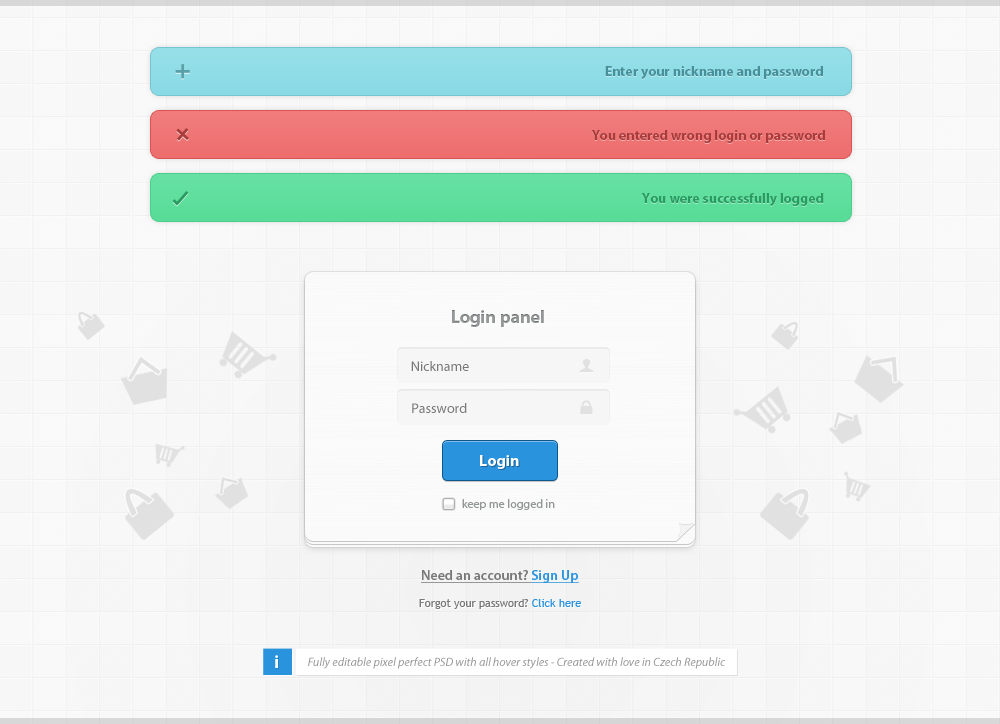
<style>
.page{position:relative;width:1000px;height:724px}
.page>*{position:absolute;margin:0}
.t1{font:14px "MyriadPro-Bold";color:#479099}
.t2{font:14px "MyriadPro-Bold";color:#a93b3b}
.t3{font:14px "MyriadPro-Bold";color:#299a60}
.t4{font:18px "MyriadPro-Bold";color:#939797}
.t5{font:14px "MyriadPro-Regular";color:#787878}
.t6{font:16px "MyriadPro-Bold";color:#ffffff}
.t7{font:12px "MyriadPro-Regular";color:#939797}
.t8{font:14px "MyriadPro-Semibold";color:#787878;text-decoration:underline}
.t9{font:14px "MyriadPro-Semibold";color:#2993de;text-decoration:underline}
.t10{font:11px "TrebuchetMS";color:#797979}
.t11{font:11px "TrebuchetMS";color:#2993de}
.t12{font:18px "MyriadPro-Bold";color:#fffefe}
.t13{font:12px "MyriadPro-It";color:#969696}
</style>
<div class="page">
<p class="t1" style="left:605px;top:66px;width:218px;height:13px">Enter your nickname and password</p>
<p class="t2" style="left:591px;top:130px;width:234px;height:13px">You entered wrong login or password</p>
<p class="t3" style="left:641px;top:193px;width:183px;height:13px">You were successfully logged</p>
<p class="t4" style="left:452px;top:310px;width:92px;height:17px">Login panel</p>
<p class="t5" style="left:411px;top:361px;width:58px;height:10px">Nickname</p>
<p class="t5" style="left:412px;top:403px;width:55px;height:10px">Password</p>
<p class="t6" style="left:480px;top:455px;width:39px;height:14px">Login</p>
<p class="t7" style="left:462px;top:499px;width:93px;height:11px">keep me logged in</p>
<p class="t8" style="left:421px;top:570px;width:158px;height:13px">Need an account? <span class="t9">Sign Up</span></p>
<p class="t10" style="left:419px;top:599px;width:162px;height:10px">Forgot your password? <span class="t11">Click here</span></p>
<p class="t12" style="left:275px;top:655px;width:3px;height:13px">i</p>
<p class="t13" style="left:308px;top:657px;width:418px;height:12px">Fully editable pixel perfect PSD with all hover styles - Created with love in Czech Republic</p>
</div>
